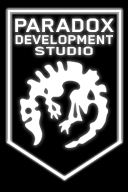
<style>
.page{position:relative;width:128px;height:192px;background:#000000}
.page>*{position:absolute;margin:0}
.t1{font:22.2px "BlenderPro-Bold";color:#ffffff;scale:1.19 1}
.t2{font:14.5px "BlenderPro-Bold";color:#ffffff;scale:1.15 1}
.t3{font:13.6px "BlenderPro-Bold";color:#ffffff;scale:1.44 1}
</style>
<div class="page">
<p class="t1" style="left:15px;top:18px;width:99px;height:14px">PARADOX</p>
<p class="t2" style="left:15px;top:35px;width:98px;height:10px">DEVELOPMENT</p>
<p class="t3" style="left:35px;top:46px;width:58px;height:10px">STUDIO</p>
</div>
